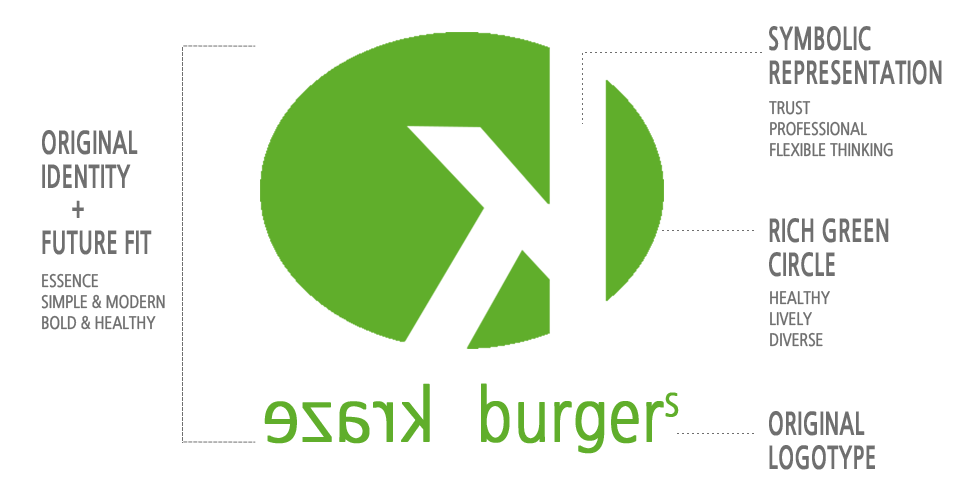
<style>
.page{position:relative;width:980px;height:500px;background:#ffffff}
.page>*{position:absolute;margin:0}
.t1{font:30.5px "NanumGothicBold";letter-spacing:-0.005em;color:#6f6f6f;text-transform:uppercase;font-weight:bold;scale:0.66 1}
.t2{font:16.8px "NanumGothic";letter-spacing:-0.005em;color:#6f6f6f;text-transform:uppercase;font-weight:bold;scale:0.79 1}
.t3{font:72px "NanumGothic";color:#60ae2b;font-weight:bold;scale:0.93 1}
.t4{font:72.1px "NanumGothic";color:#60ae2b;font-weight:bold;scale:0.8 1}
</style>
<div class="page">
<p class="t1" style="left:769px;top:26px;width:173px;height:59px">symbolic<br>representation</p>
<p class="t2" style="left:769px;top:100px;width:124px;height:57px">trust<br>professional<br>flexible thinking</p>
<p class="t1" style="left:42px;top:130px;width:110px;height:125px">original<br>identity<br>     +<br>future fit</p>
<p class="t1" style="left:769px;top:218px;width:120px;height:59px">rich green<br>circle</p>
<p class="t2" style="left:41px;top:273px;width:124px;height:57px">essence<br>simple &amp; modern<br>bold &amp; healthy<br>extension</p>
<p class="t2" style="left:770px;top:291px;width:60px;height:56px">healthy<br>lively<br>diverse</p>
<p class="t3" style="left:264px;top:383px;width:166px;height:61px;rotate:180deg">kraze</p>
<p class="t4" style="left:481px;top:383px;width:198px;height:71px">burgers</p>
<p class="t1" style="left:769px;top:411px;width:106px;height:59px">original<br>logotype</p>
</div>
